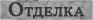
<style>
.page{position:relative;width:93px;height:20px}
.page>*{position:absolute;margin:0}
.t1{font:18.8px "CooperMediumCBT";letter-spacing:0.04em;color:#272727;font-variant:small-caps;font-weight:bold}
</style>
<div class="page">
<p class="t1" style="left:8px;top:2px;width:77px;height:17px;opacity:0.9">Отделка</p>
</div>
